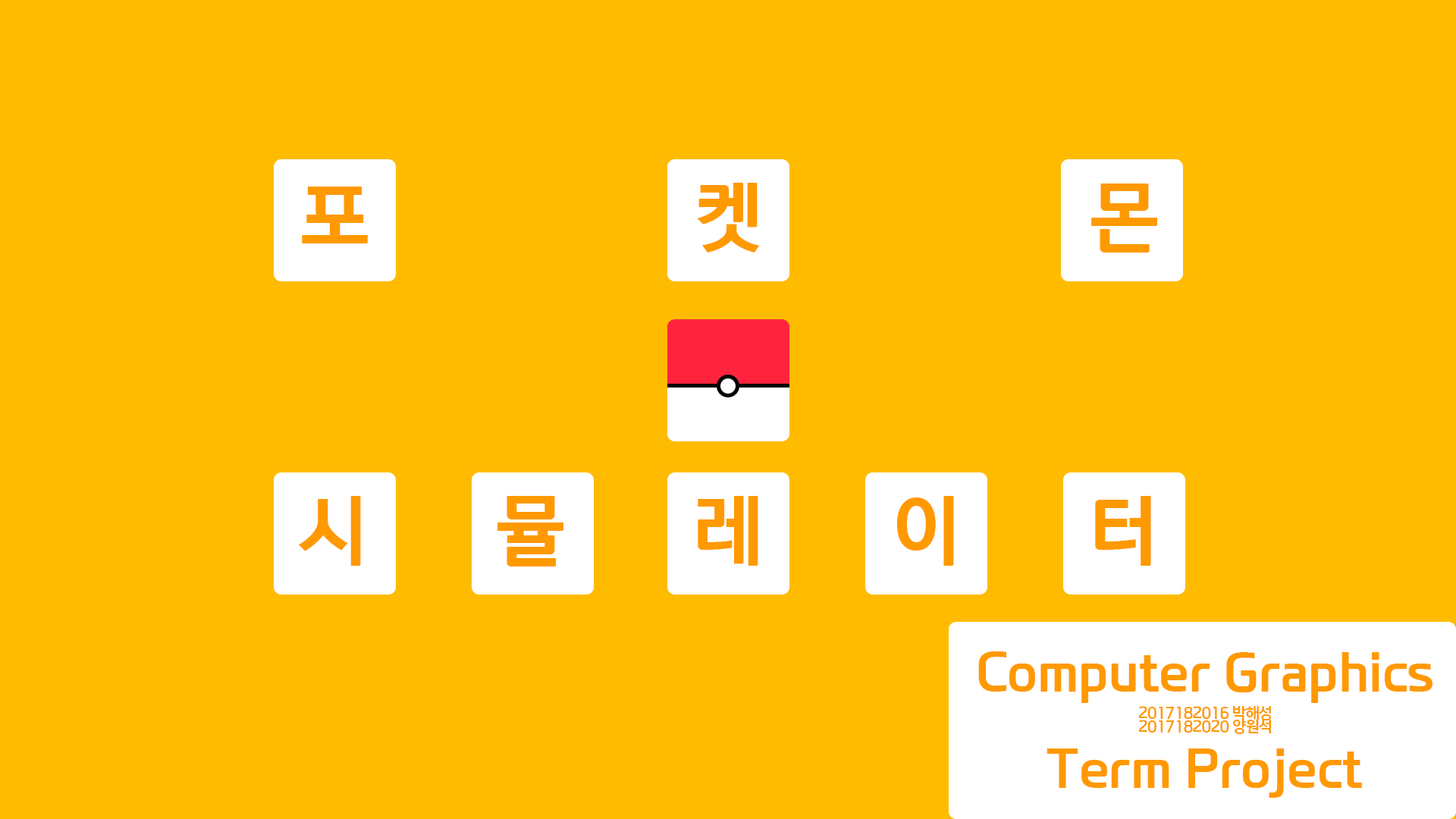
<style>
.page{position:relative;width:1456px;height:819px;background:#ffbb00}
.page>*{position:absolute;margin:0}
.t1{font:72.8px "payboocExtraBold";color:#ff9900}
.t2{font:48.5px/96.1px "payboocExtraBold";color:#ff9900}
.t3{font:14.2px/14.2px "payboocExtraBold";color:#ff9900}
</style>
<div class="page">
<p class="t1" style="left:697px;top:183px;width:63px;height:70px">켓</p>
<p class="t1" style="left:1091px;top:184px;width:66px;height:69px">몬</p>
<p class="t1" style="left:302px;top:187px;width:66px;height:56px">포</p>
<p class="t1" style="left:298px;top:496px;width:63px;height:70px">시</p>
<p class="t1" style="left:497px;top:496px;width:66px;height:70px">뮬</p>
<p class="t1" style="left:698px;top:496px;width:60px;height:70px">레</p>
<p class="t1" style="left:896px;top:496px;width:58px;height:70px">이</p>
<p class="t1" style="left:1095px;top:496px;width:56px;height:70px">터</p>
<p class="t2" style="left:978px;top:651px;width:454px;height:147px;text-align:center">Computer Graphics<br>Term Project</p>
<p class="t3" style="left:1139px;top:706px;width:133px;height:28px;text-align:center">2017182016 박해성<br>2017182020 양원석</p>
</div>
